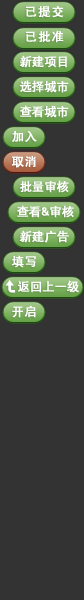
<style>
.page{position:relative;width:84px;height:600px;background:#333333}
.page>*{position:absolute;margin:0}
.t1{font:12px "HYb1gj";letter-spacing:0.1em;color:#ffffff;font-weight:bold}
.t2{font:12px "HYb1gj";color:#ffffff;font-weight:bold}
.t3{font:12px "HYb1gj";letter-spacing:0.05em;color:#ffffff;font-weight:bold}
</style>
<div class="page">
<p class="t1" style="left:26px;top:6px;width:38px;height:12px">已提交</p>
<p class="t1" style="left:26px;top:30px;width:38px;height:13px">已批准</p>
<p class="t2" style="left:19px;top:55px;width:48px;height:13px">新建项目</p>
<p class="t2" style="left:20px;top:80px;width:49px;height:13px">选择城市</p>
<p class="t2" style="left:20px;top:105px;width:49px;height:13px">查看城市</p>
<p class="t3" style="left:12px;top:131px;width:25px;height:11px">加入</p>
<p class="t3" style="left:11px;top:156px;width:25px;height:12px">取消</p>
<p class="t2" style="left:20px;top:180px;width:49px;height:13px">批量审核</p>
<p class="t2" style="left:17px;top:205px;width:57px;height:13px">查看&amp;审核</p>
<p class="t2" style="left:19px;top:230px;width:50px;height:13px">新建广告</p>
<p class="t3" style="left:11px;top:255px;width:25px;height:13px">填写</p>
<p class="t2" style="left:18px;top:280px;width:61px;height:13px">返回上一级</p>
<p class="t3" style="left:12px;top:305px;width:24px;height:13px">开启</p>
</div>
